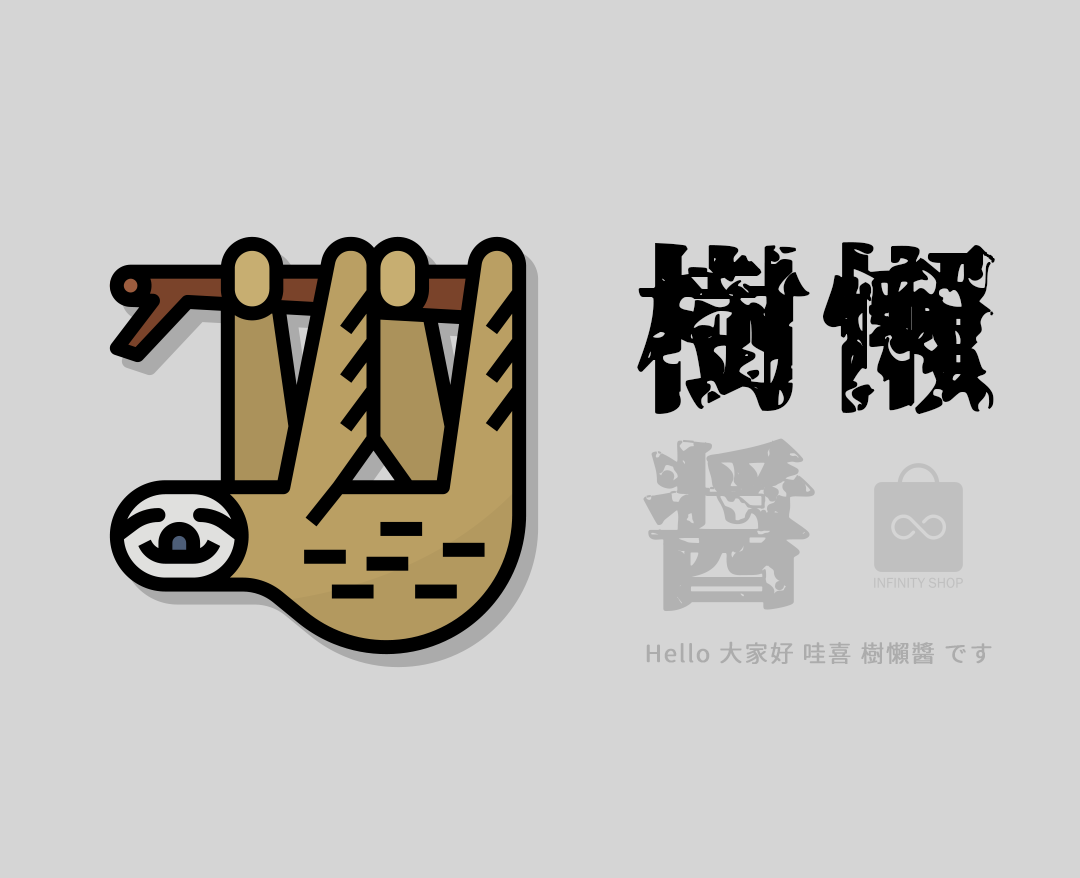
<style>
.page{position:relative;width:1080px;height:878px;background:#d5d5d5}
.page>*{position:absolute;margin:0}
.t1{font:174.9px "Genkaimincho";letter-spacing:0.05em;color:#000000;font-weight:bold}
.t2{font:174.9px "Genkaimincho";letter-spacing:0.05em;color:#b2b2b2;font-weight:bold}
.t3{font:23.8px "GenJyuuGothic-Regular";letter-spacing:0.05em;color:#acacac;font-weight:bold}
</style>
<div class="page">
<p class="t1" style="left:637px;top:242px;width:358px;height:172px">樹懶</p>
<p class="t2" style="left:643px;top:438px;width:172px;height:174px">醤</p>
<p class="t3" style="left:646px;top:641px;width:346px;height:23px">Hello 大家好 哇喜 樹懶醬 です</p>
</div>
